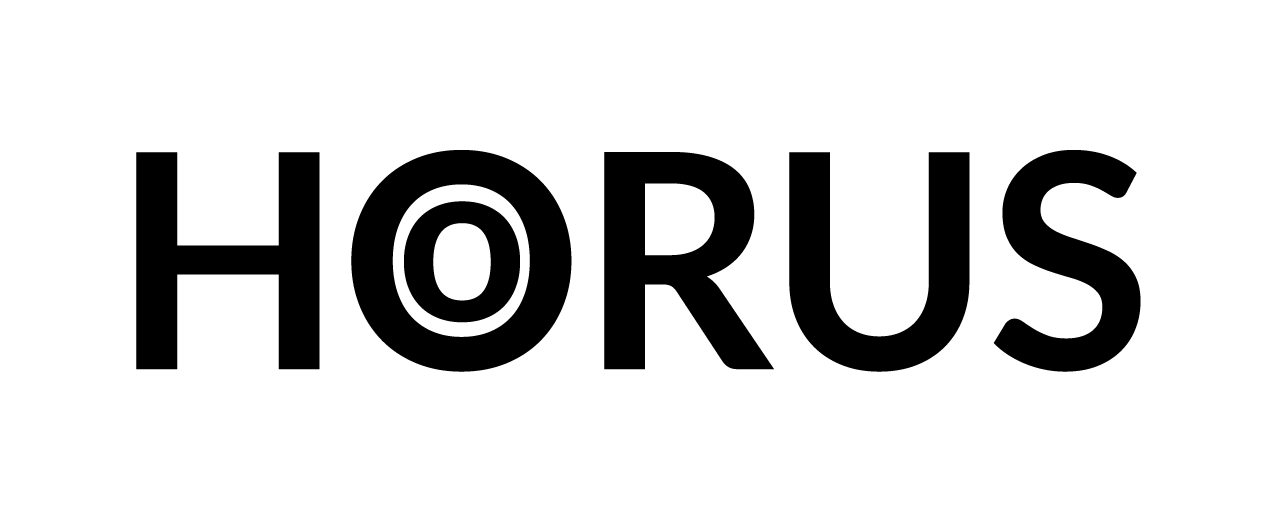
<style>
.page{position:relative;width:1280px;height:528px;background:#ffffff}
.page>*{position:absolute;margin:0}
.t1{font:300px "Lato-Bold";color:#000000}
.t2{font:228.4px "Lato-Bold";color:#000000}
</style>
<div class="page">
<p class="t1" style="left:136px;top:150px;width:1005px;height:222px">HORUS</p>
<p class="t2" style="left:404px;top:201px;width:116px;height:122px">o</p>
</div>
